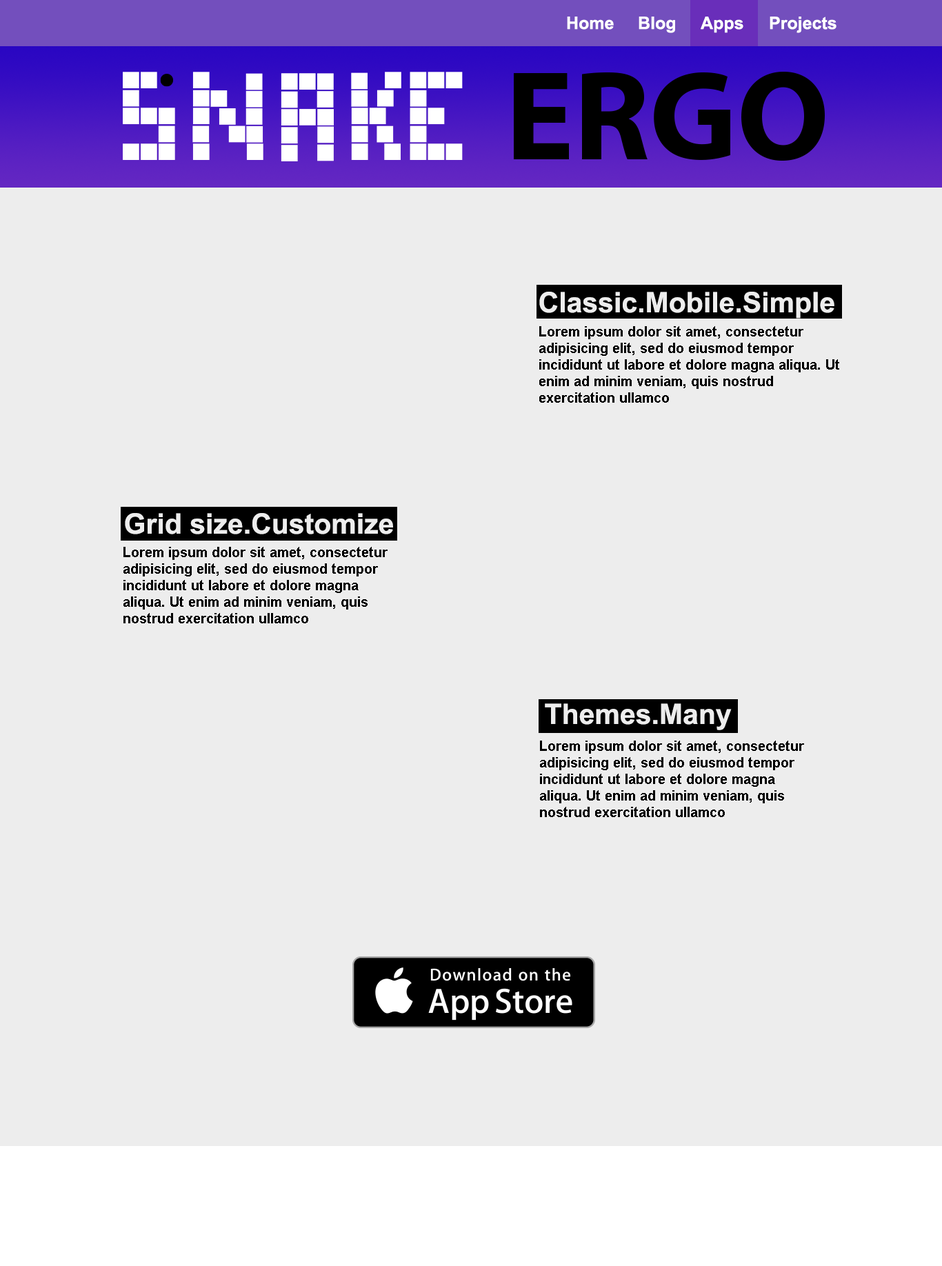
<style>
.page{position:relative;width:942px;height:1266px;background:#ededed}
.page>*{position:absolute;margin:0}
.t1{font:17.2px "Arial-BoldMT";color:#ffffff}
.t2{font:28.3px "Arial-BoldMT";color:#ededed}
.t3{font:13.8px "Arial-BoldMT";color:#000000}
</style>
<div class="page">
<p class="t1" style="left:567px;top:17px;width:47px;height:13px">Home</p>
<p class="t1" style="left:639px;top:17px;width:36px;height:16px">Blog</p>
<p class="t1" style="left:701px;top:17px;width:42px;height:16px">Apps</p>
<p class="t1" style="left:770px;top:17px;width:66px;height:16px">Projects</p>
<p class="t2" style="left:539px;top:292px;width:295px;height:27px">Classic.Mobile.Simple</p>
<p class="t3" style="left:539px;top:326px;width:300px;height:77px">Lorem ipsum dolor sit amet, consectetur adipisicing elit, sed do eiusmod tempor incididunt ut labore et dolore magna aliqua. Ut enim ad minim veniam, quis nostrud exercitation ullamco</p>
<p class="t2" style="left:125px;top:513px;width:268px;height:21px">Grid size.Customize</p>
<p class="t3" style="left:123px;top:547px;width:265px;height:76px">Lorem ipsum dolor sit amet, consectetur adipisicing elit, sed do eiusmod tempor incididunt ut labore et dolore magna aliqua. Ut enim ad minim veniam, quis nostrud exercitation ullamco</p>
<p class="t2" style="left:545px;top:703px;width:187px;height:27px">Themes.Many</p>
<p class="t3" style="left:540px;top:741px;width:264px;height:76px">Lorem ipsum dolor sit amet, consectetur adipisicing elit, sed do eiusmod tempor incididunt ut labore et dolore magna aliqua. Ut enim ad minim veniam, quis nostrud exercitation ullamco</p>
</div>
